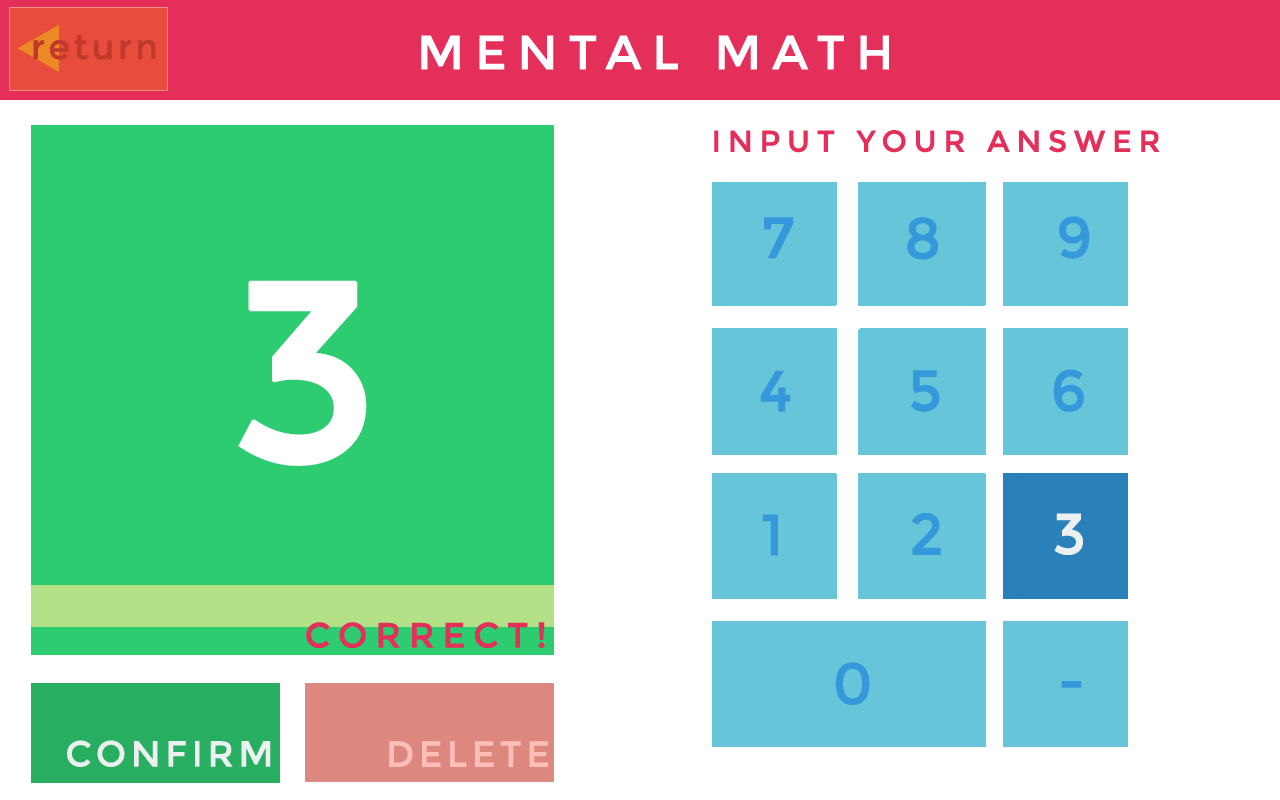
<style>
.page{position:relative;width:1280px;height:800px;background:#ffffff}
.page>*{position:absolute;margin:0}
.t1{font:35px "Montserrat-Regular";letter-spacing:0.075em;color:#c1392b;font-weight:bold}
.t2{font:48px "Montserrat-Regular";letter-spacing:0.2em;color:#ffffff;text-transform:uppercase;font-weight:bold}
.t3{font:30px "Montserrat-Regular";letter-spacing:0.2em;color:#e42f5a;text-transform:uppercase;font-weight:bold}
.t4{font:57.6px "Montserrat-Regular";letter-spacing:0.2em;color:#3598db;text-transform:uppercase;font-weight:bold}
.t5{font:256.5px "Montserrat-Regular";letter-spacing:0.2em;color:#ffffff;text-transform:uppercase;font-weight:bold}
.t6{font:57.6px "Montserrat-Regular";letter-spacing:0.2em;color:#ecf0f1;text-transform:uppercase;font-weight:bold}
.t7{font:35.1px "Montserrat-Regular";letter-spacing:0.2em;color:#e42f5a;text-transform:uppercase;font-weight:bold}
.t8{font:36px "Montserrat-Regular";letter-spacing:0.1em;color:#ecf0f1;text-transform:uppercase;font-weight:bold}
.t9{font:36px "Montserrat-Regular";letter-spacing:0.1em;color:#ffbfb8;text-transform:uppercase;font-weight:bold}
</style>
<div class="page">
<p class="t1" style="left:33px;top:34px;width:123px;height:26px">return</p>
<p class="t2" style="left:421px;top:35px;width:468px;height:35px">Mental Math</p>
<p class="t3" style="left:714px;top:130px;width:446px;height:23px">Input your Answer</p>
<p class="t4" style="left:764px;top:217px;width:30px;height:42px">7</p>
<p class="t4" style="left:907px;top:217px;width:31px;height:43px">8</p>
<p class="t4" style="left:1059px;top:216px;width:31px;height:43px">9</p>
<p class="t5" style="left:238px;top:280px;width:129px;height:186px">3</p>
<p class="t4" style="left:760px;top:370px;width:31px;height:42px">4</p>
<p class="t4" style="left:911px;top:370px;width:29px;height:42px">5</p>
<p class="t4" style="left:1053px;top:369px;width:31px;height:43px">6</p>
<p class="t4" style="left:762px;top:514px;width:16px;height:42px">1</p>
<p class="t4" style="left:912px;top:513px;width:29px;height:42px">2</p>
<p class="t6" style="left:1054px;top:513px;width:29px;height:42px">3</p>
<p class="t7" style="left:306px;top:622px;width:239px;height:26px">Correct!</p>
<p class="t4" style="left:835px;top:662px;width:35px;height:43px">0</p>
<p class="t4" style="left:1061px;top:681px;width:21px;height:7px">-</p>
<p class="t8" style="left:67px;top:740px;width:204px;height:27px">Confirm</p>
<p class="t9" style="left:389px;top:741px;width:159px;height:26px">Delete</p>
</div>
